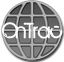
<style>
.page{position:relative;width:64px;height:62px}
.page>*{position:absolute;margin:0}
.t1{font:23.3px "BIRTHOFAHERO";color:#ffffff}
</style>
<div class="page">
<p class="t1" style="left:0px;top:22px;width:63px;height:17px">OnTrac</p>
</div>
